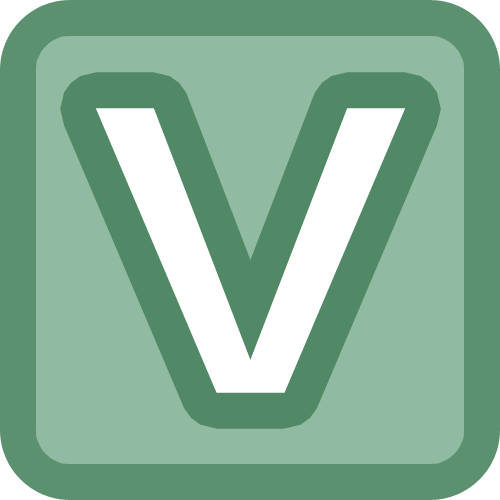
<style>
.page{position:relative;width:500px;height:500px;background:#90baa1}
.page>*{position:absolute;margin:0}
.t1{font:390px "Menlo-Regular";color:#ffffff;scale:1.45 1}
</style>
<div class="page">
<p class="t1" style="left:96px;top:108px;width:309px;height:285px">V</p>
</div>
